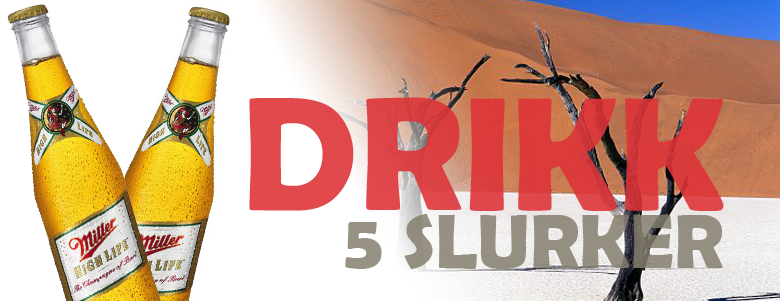
<style>
.page{position:relative;width:780px;height:301px;background:#ffffff}
.page>*{position:absolute;margin:0}
.t1{font:163px "BerlinSansFBDemi-Bold";color:#dd3337}
.t2{font:77.6px "BerlinSansFBDemi-Bold";color:#837d6c}
</style>
<div class="page">
<p class="t1" style="left:249px;top:97px;width:475px;height:114px;opacity:0.89">DRIKK</p>
<p class="t2" style="left:345px;top:214px;width:378px;height:55px;opacity:0.84">5 SLURKER</p>
</div>
